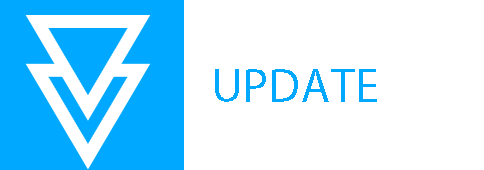
<style>
.page{position:relative;width:484px;height:170px;background:#ffffff}
.page>*{position:absolute;margin:0}
.t1{font:47.7px "MyriadPro-Regular";color:#00a8ff}
</style>
<div class="page">
<p class="t1" style="left:215px;top:69px;width:162px;height:33px">UPDATE</p>
</div>
